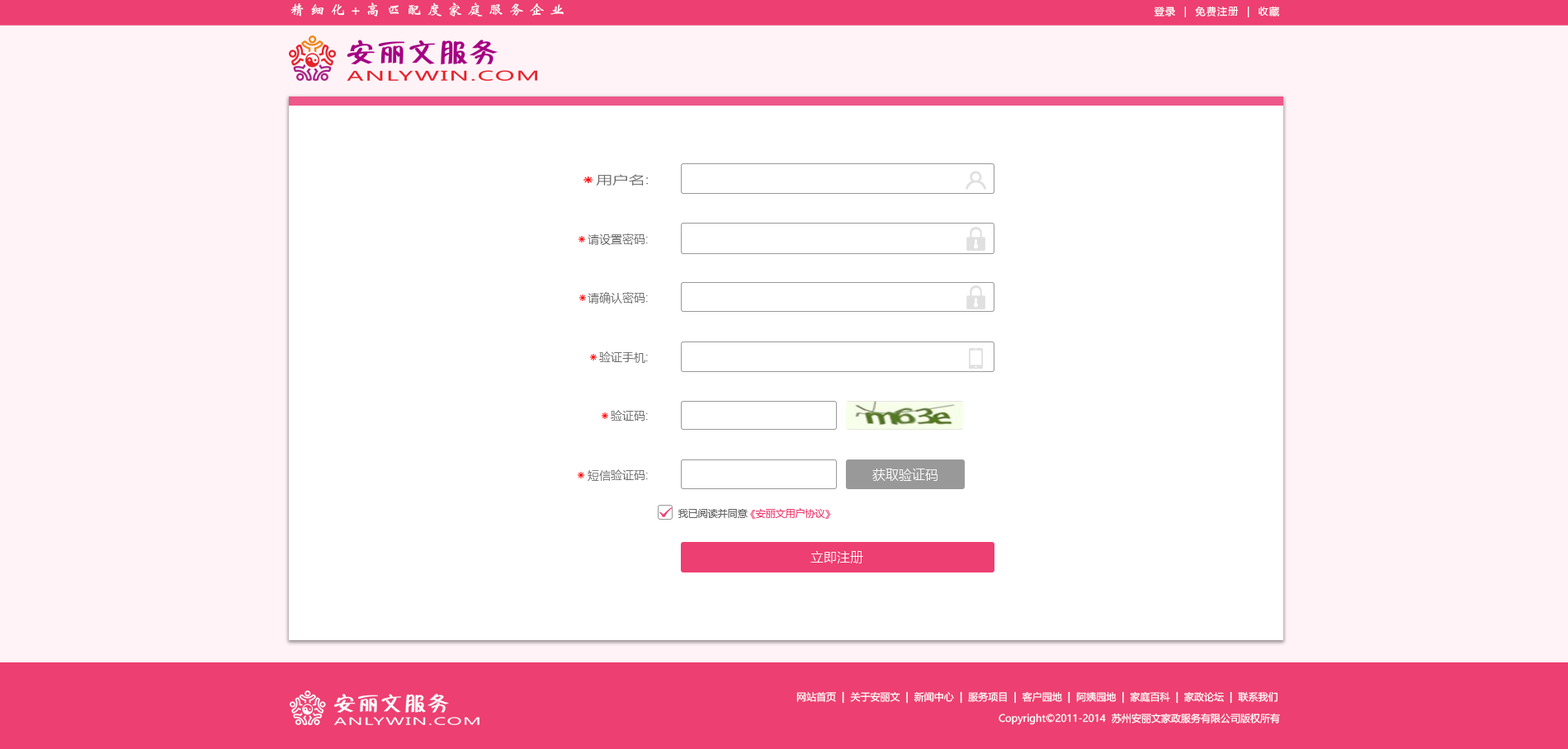
<style>
.page{position:relative;width:1568px;height:749px;background:#ffffff}
.page>*{position:absolute;margin:0}
.t1{font:14.9px "FZWBJW--GB1-0";letter-spacing:0.05em;color:#ffffff}
.t2{font:9.9px "MicrosoftYaHei";letter-spacing:0.1em;color:#ffffff;text-transform:uppercase}
.t3{font:11.6px "MicrosoftYaHeiLight";color:#666666;scale:1.42 1}
.t4{font:11.6px "MicrosoftYaHeiLight";color:#666666}
.t5{font:13.2px "MicrosoftYaHeiLight";color:#ffffff}
.t6{font:9.9px "MicrosoftYaHei";color:#ed3f71}
.t7{font:9.9px "MicrosoftYaHei";color:#666666}
.t8{font:9.9px "MicrosoftYaHei";color:#ffffff}
</style>
<div class="page">
<p class="t1" style="left:290px;top:2px;width:274px;height:15px">精 细 化 + 高 匹 配 度 家 庭 服 务 企 业</p>
<p class="t2" style="left:1154px;top:6px;width:126px;height:11px">登录  |  免费注册  |  收藏</p>
<p class="t3" style="left:596px;top:174px;width:53px;height:12px">用户名:</p>
<p class="t4" style="left:588px;top:234px;width:60px;height:11px">请设置密码:</p>
<p class="t4" style="left:588px;top:292px;width:60px;height:12px">请确认密码:</p>
<p class="t4" style="left:599px;top:352px;width:49px;height:11px">验证手机:</p>
<p class="t4" style="left:611px;top:410px;width:37px;height:11px">验证码:</p>
<p class="t4" style="left:588px;top:470px;width:60px;height:11px">短信验证码:</p>
<p class="t5" style="left:872px;top:469px;width:65px;height:12px">获取验证码</p>
<p class="t6" style="left:678px;top:508px;width:153px;height:11px"><span class="t7">我已阅读并同意 </span>《安丽文用户协议》</p>
<p class="t5" style="left:810px;top:551px;width:53px;height:13px">立即注册</p>
<p class="t8" style="left:796px;top:692px;width:482px;height:12px">网站首页  |  关于安丽文  |  新闻中心  |  服务项目  |  客户园地  |  阿姨园地  |  家庭百科  |  家政论坛  |  联系我们</p>
<p class="t8" style="left:999px;top:713px;width:281px;height:12px">Copyright©2011-2014  苏州安丽文家政服务有限公司版权所有</p>
</div>
